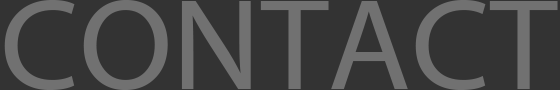
<style>
.page{position:relative;width:560px;height:90px;background:#333333}
.page>*{position:absolute;margin:0}
.t1{font:130px "MyriadWebPro";color:#717171}
</style>
<div class="page">
<p class="t1" style="left:4px;top:0px;width:554px;height:90px">CONTACT</p>
</div>
